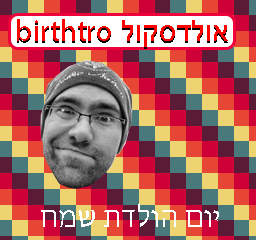
<style>
.page{position:relative;width:256px;height:240px}
.page>*{position:absolute;margin:0}
.t1{font:30px "MyriadHebrew-Regular";color:#ff0000}
.t2{font:30px "ArialHebrew";color:#ff0000}
.t3{font:30px "MyriadHebrew-Regular";color:#ffffff}
</style>
<div class="page">
<p class="t1" style="left:17px;top:19px;width:211px;height:28px">birthtro<span class="t2"> אולדסקול</span></p>
<p class="t3" style="left:41px;top:203px;width:178px;height:24px">יום הולדת שמח</p>
</div>
